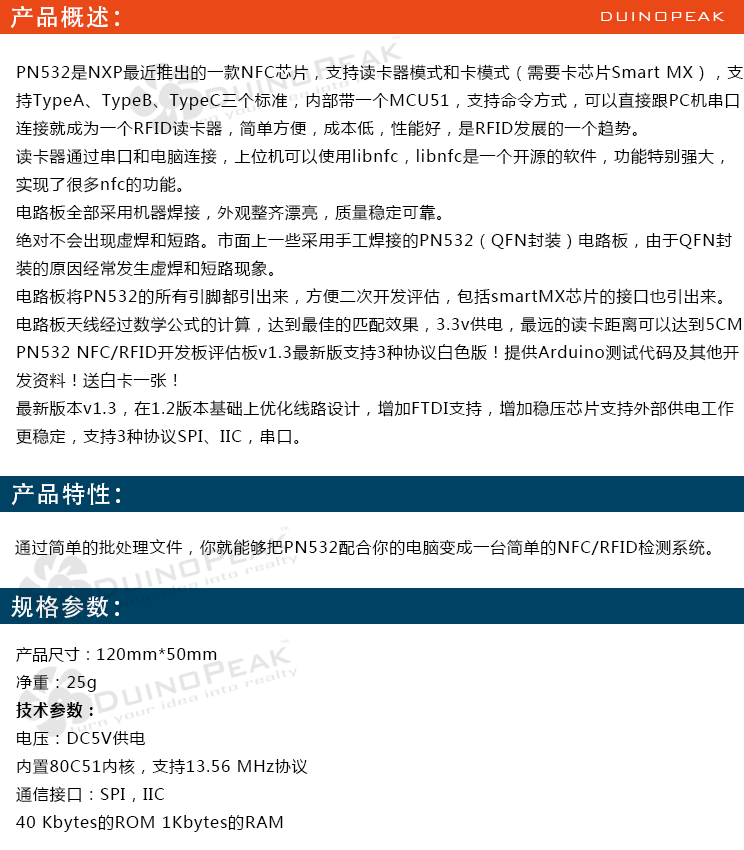
<style>
.page{position:relative;width:744px;height:850px;background:#ffffff}
.page>*{position:absolute;margin:0}
.t1{font:24px "AdobeHeitiStd-Regular";letter-spacing:0.05em;color:#ffffff}
.t2{font:18px "BankGothicBT-Light";letter-spacing:0.05em;color:#ffffff}
.t3{font:16px "MicrosoftYaHei";letter-spacing:0.05em;color:#000000}
.t4{font:16px "MicrosoftYaHei";color:#000000}
.t5{font:16px "MicrosoftYaHei-Bold";letter-spacing:0.05em;color:#000000}
</style>
<div class="page">
<p class="t1" style="left:10px;top:6px;width:109px;height:23px">产品概述：</p>
<p class="t2" style="left:601px;top:12px;width:124px;height:9px">DUINOPEAK</p>
<p class="t3" style="left:16px;top:64px;width:727px;height:381px">PN532是NXP最近推出的一款NFC芯片，支持读卡器模式和卡模式（需要卡芯片Smart MX），支<br>持TypeA、TypeB、TypeC三个标准，内部带一个MCU51，支持命令方式，可以直接跟PC机串口<br>连接就成为一个RFID读卡器，简单方便，成本低，性能好，是RFID发展的一个趋势。<br>读卡器通过串口和电脑连接，上位机可以使用libnfc，libnfc是一个开源的软件，功能特别强大，<br>实现了很多nfc的功能。<br>电路板全部采用机器焊接，外观整齐漂亮，质量稳定可靠。<br>绝对不会出现虚焊和短路。市面上一些采用手工焊接的PN532（QFN封装）电路板，由于QFN封<br>装的原因经常发生虚焊和短路现象。<br>电路板将PN532的所有引脚都引出来，方便二次开发评估，包括smartMX芯片的接口也引出来。<br>电路板天线经过数学公式的计算，达到最佳的匹配效果，3.3v供电，最远的读卡距离可以达到5CM<br>PN532 NFC/RFID开发板评估板v1.3最新版支持3种协议白色版！提供Arduino测试代码及其他开<br>发资料！送白卡一张！<br>最新版本v1.3，在1.2版本基础上优化线路设计，增加FTDI支持，增加稳压芯片支持外部供电工作<br>更稳定，支持3种协议SPI、IIC，串口。</p>
<p class="t1" style="left:11px;top:482px;width:109px;height:24px">产品特性：</p>
<p class="t3" style="left:15px;top:539px;width:696px;height:17px">通过简单的批处理文件，你就能够把PN532配合你的电脑变成一台简单的NFC/RFID检测系统。</p>
<p class="t1" style="left:11px;top:595px;width:108px;height:23px">规格参数：</p>
<p class="t3" style="left:16px;top:647px;width:292px;height:185px"><span class="t4">产品尺寸：</span>120mm*50mm<br>净重：25g<br><span class="t5">技术参数：<br></span>电压：DC5V供电<br>内置80C51内核，支持13.56 MHz协议<br>通信接口：SPI，IIC<br>40 Kbytes的ROM 1Kbytes的RAM</p>
</div>
